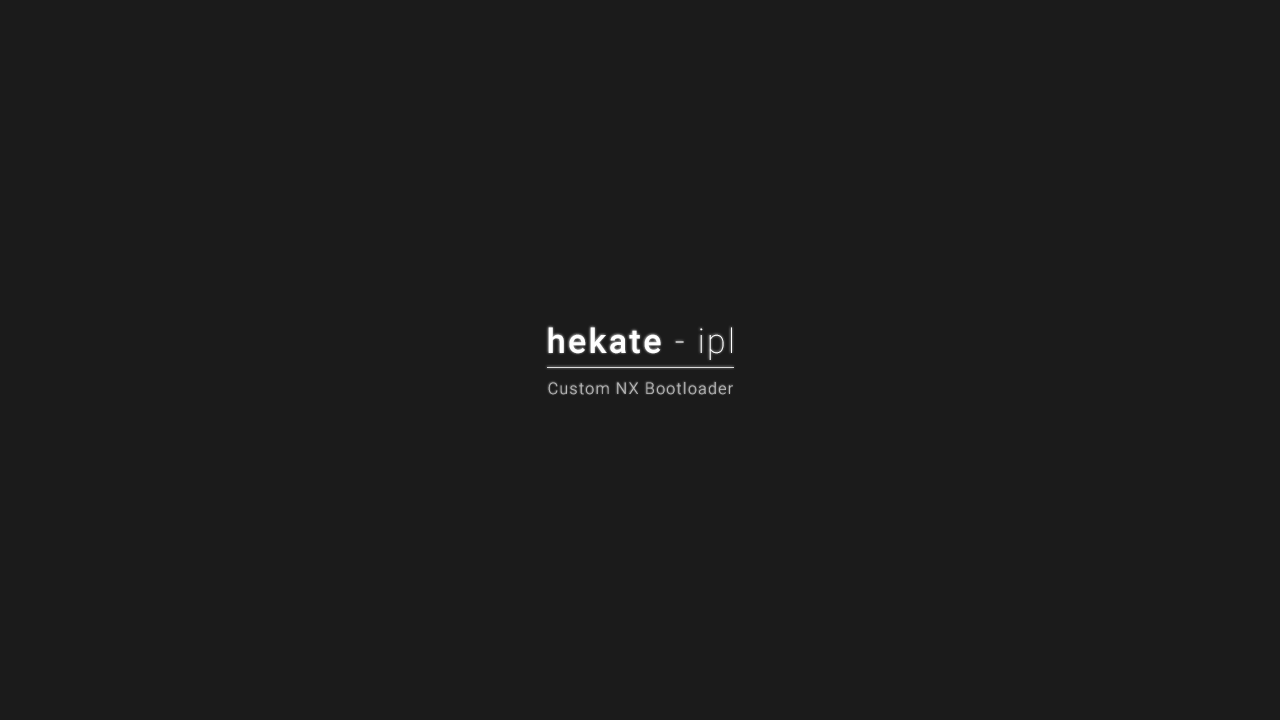
<style>
.page{position:relative;width:1280px;height:720px;background:#1b1b1b}
.page>*{position:absolute;margin:0}
.t1{font:34px "Roboto-Medium";letter-spacing:0.07em;color:#ffffff}
.t2{font:34px "Roboto-Thin";letter-spacing:0.07em;color:#ffffff}
.t3{font:16px "Roboto-Light";letter-spacing:0.08em;color:#c1c1c1}
</style>
<div class="page">
<p class="t1" style="left:548px;top:327px;width:184px;height:33px">hekate <span class="t2">- ipl</span></p>
<p class="t3" style="left:548px;top:382px;width:185px;height:13px;opacity:0.95">Custom NX Bootloader</p>
</div>
